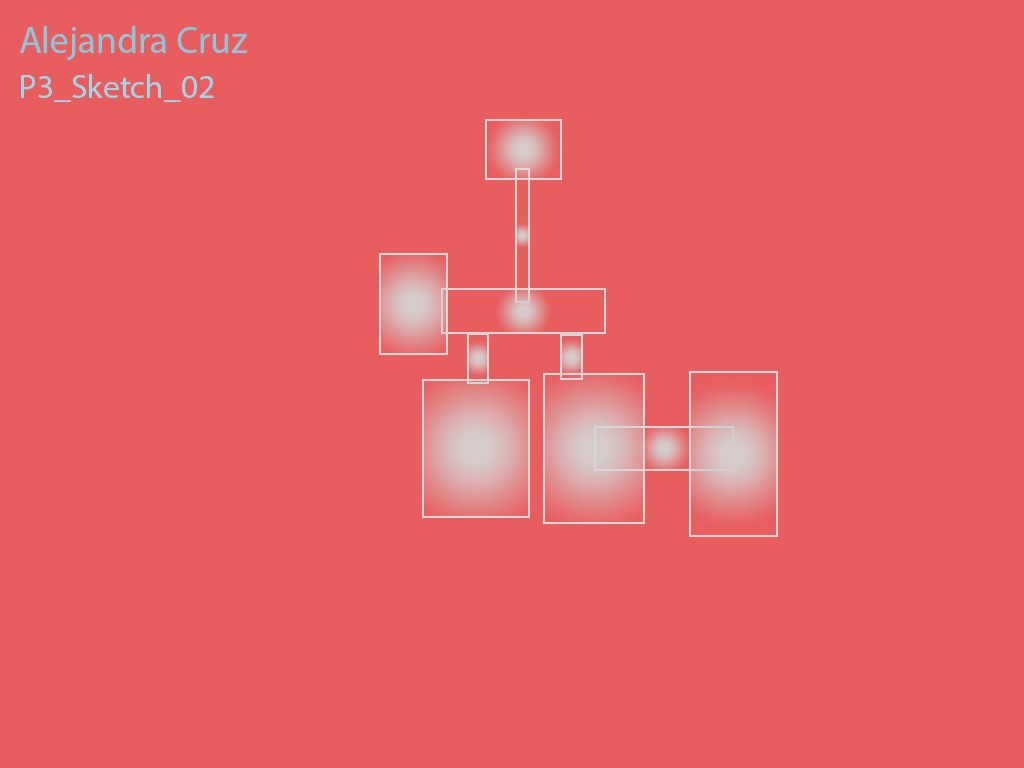
<style>
.page{position:relative;width:1024px;height:768px;background:#e85e5e}
.page>*{position:absolute;margin:0}
.t1{font:37.5px "MyriadPro-Regular";color:#89c8dc}
.t2{font:33.3px "MyriadPro-Regular";color:#9ed6e8}
</style>
<div class="page">
<p class="t1" style="left:20px;top:26px;width:227px;height:34px">Alejandra Cruz</p>
<p class="t2" style="left:21px;top:74px;width:193px;height:28px">P3_Sketch_02</p>
</div>
